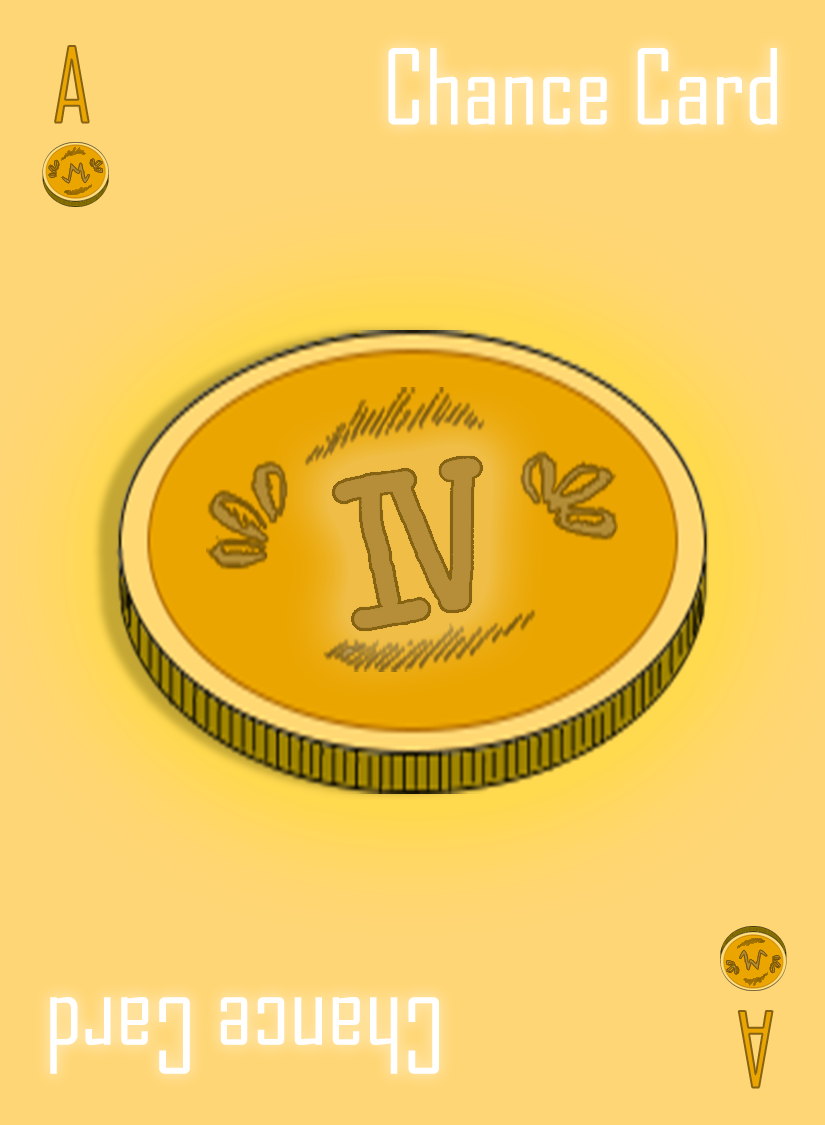
<style>
.page{position:relative;width:825px;height:1125px;background:#ffd675}
.page>*{position:absolute;margin:0}
.t1{font:100px "AgencyFB-Reg";color:#eaa500}
.t2{font:100px "AgencyFB-Reg";color:#ffffff}
</style>
<div class="page">
<p class="t1" style="left:55px;top:46px;width:34px;height:77px">A</p>
<p class="t2" style="left:388px;top:48px;width:389px;height:77px">Chance Card</p>
<p class="t2" style="left:50px;top:997px;width:389px;height:77px;rotate:180deg">Chance Card</p>
<p class="t1" style="left:738px;top:1011px;width:35px;height:77px;rotate:180deg">A</p>
</div>
